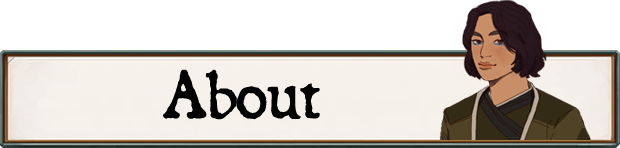
<style>
.page{position:relative;width:620px;height:148px;background:#ffffff}
.page>*{position:absolute;margin:0}
.t1{font:60px "Dominican";color:#000000}
</style>
<div class="page">
<p class="t1" style="left:163px;top:69px;width:157px;height:51px">About</p>
</div>
